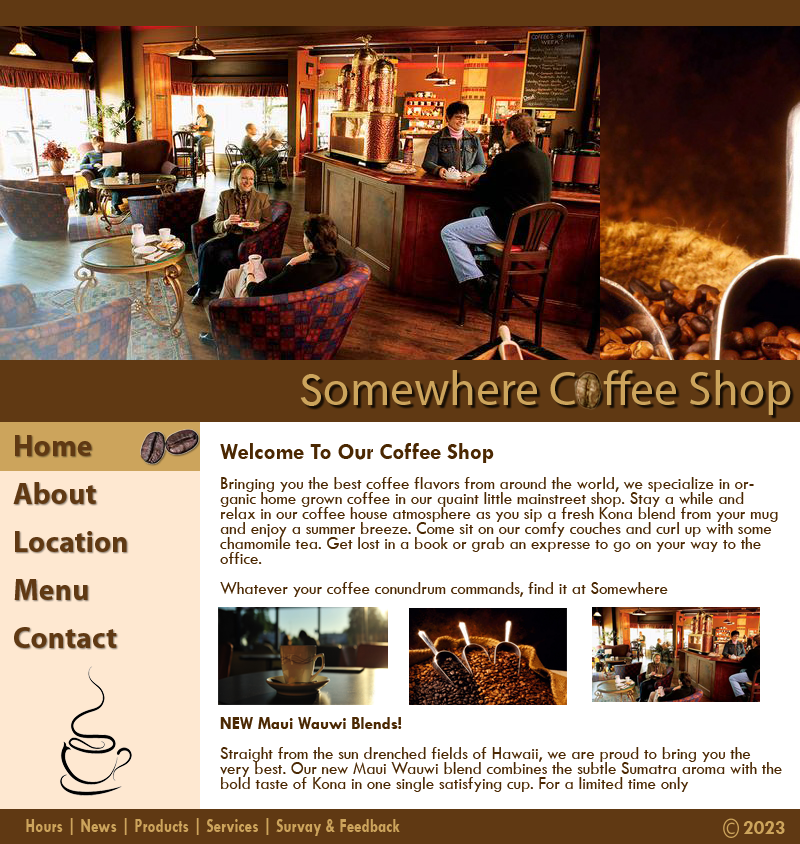
<style>
.page{position:relative;width:800px;height:844px;background:#ffffff}
.page>*{position:absolute;margin:0}
.t1{font:48px "MyriadPro-Regular";color:#cca45c}
.t2{font:48px "TwCenMT-Regular";color:#cca45c}
.t3{font:30px/48px "MyriadPro-Bold";color:#603913}
.t4{font:18px/15px "TwCenMT-Regular";color:#4b2802;scale:0.94 1}
.t5{font:24px/15px "TwCenMT-Bold";color:#4b2802;scale:0.94 1}
.t6{font:18px/15px "TwCenMT-Bold";color:#4b2802;scale:0.94 1}
.t7{font:20px "TwCenMT-Bold";color:#cca45c;scale:0.77 1}
.t8{font:20px "TwCenMT-Bold";color:#cca45c}
</style>
<div class="page">
<p class="t1" style="left:300px;top:370px;width:491px;height:45px"><span class="t2">S</span>omewhere Coffee Shop</p>
<p class="t3" style="left:13px;top:435px;width:114px;height:213px">Home<br>About<br>Location<br>Menu<br>Contact</p>
<p class="t4" style="left:220px;top:443px;width:562px;height:349px"><span class="t5">Welcome To Our Coffee Shop<br><br></span>Bringing you the best coffee flavors from around the world, we specialize in organic home grown coffee in our quaint little mainstreet shop. Stay a while and relax in our coffee house atmosphere as you sip a fresh Kona blend from your mug and enjoy a summer breeze. Come sit on our comfy couches and curl up with some chamomile tea. Get lost in a book or grab an expresse to go on your way to the office. <br><br>Whatever your coffee conundrum commands, find it at Somewhere<br><br><br><br><br><br><br><br><br><span class="t6">NEW Maui Wauwi Blends!<br><br></span>Straight from the sun drenched fields of Hawaii, we are proud to bring you the very best. Our new Maui Wauwi blend combines the subtle Sumatra aroma with the bold taste of Kona in one single satisfying cup. For a limited time only</p>
<p class="t7" style="left:26px;top:818px;width:374px;height:18px">Hours | News | Products | Services | Survay &amp; Feedback</p>
<p class="t8" style="left:743px;top:821px;width:42px;height:13px">2023</p>
</div>
